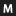
<style>
.page{position:relative;width:16px;height:16px;background:#1f1f1f}
.page>*{position:absolute;margin:0}
.t1{font:12px "MyriadPro-Semibold";color:#ffffff}
</style>
<div class="page">
<p class="t1" style="left:3px;top:4px;width:10px;height:9px">M</p>
</div>
